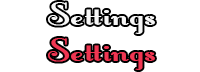
<style>
.page{position:relative;width:200px;height:72px;background:#ffffff}
.page>*{position:absolute;margin:0}
.t1{font:40px "FontleroyBrownNF";color:#f03652;scale:1.42 1}
</style>
<div class="page">
<p class="t1" style="left:48px;top:38px;width:107px;height:32px">Settings</p>
</div>
